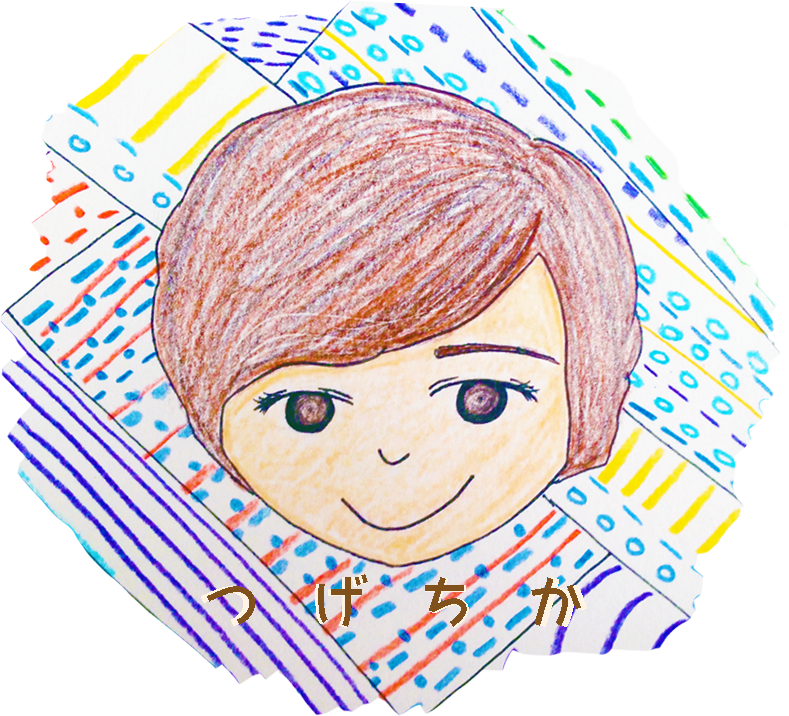
<style>
.page{position:relative;width:789px;height:716px;background:#ffffff}
.page>*{position:absolute;margin:0}
.t1{font:60px "RiiPopkaku-R";letter-spacing:-0.1em;font-weight:bold}
.t2{font:60px "RiiPopkaku-R";letter-spacing:-0.1em;color:#81511c}
</style>
<div class="page">
<p class="t1" style="left:201px;top:574px;width:386px;height:54px">つ　げ　ち　か</p>
<p class="t2" style="left:207px;top:574px;width:374px;height:53px">つ　げ　ち　か</p>
</div>
